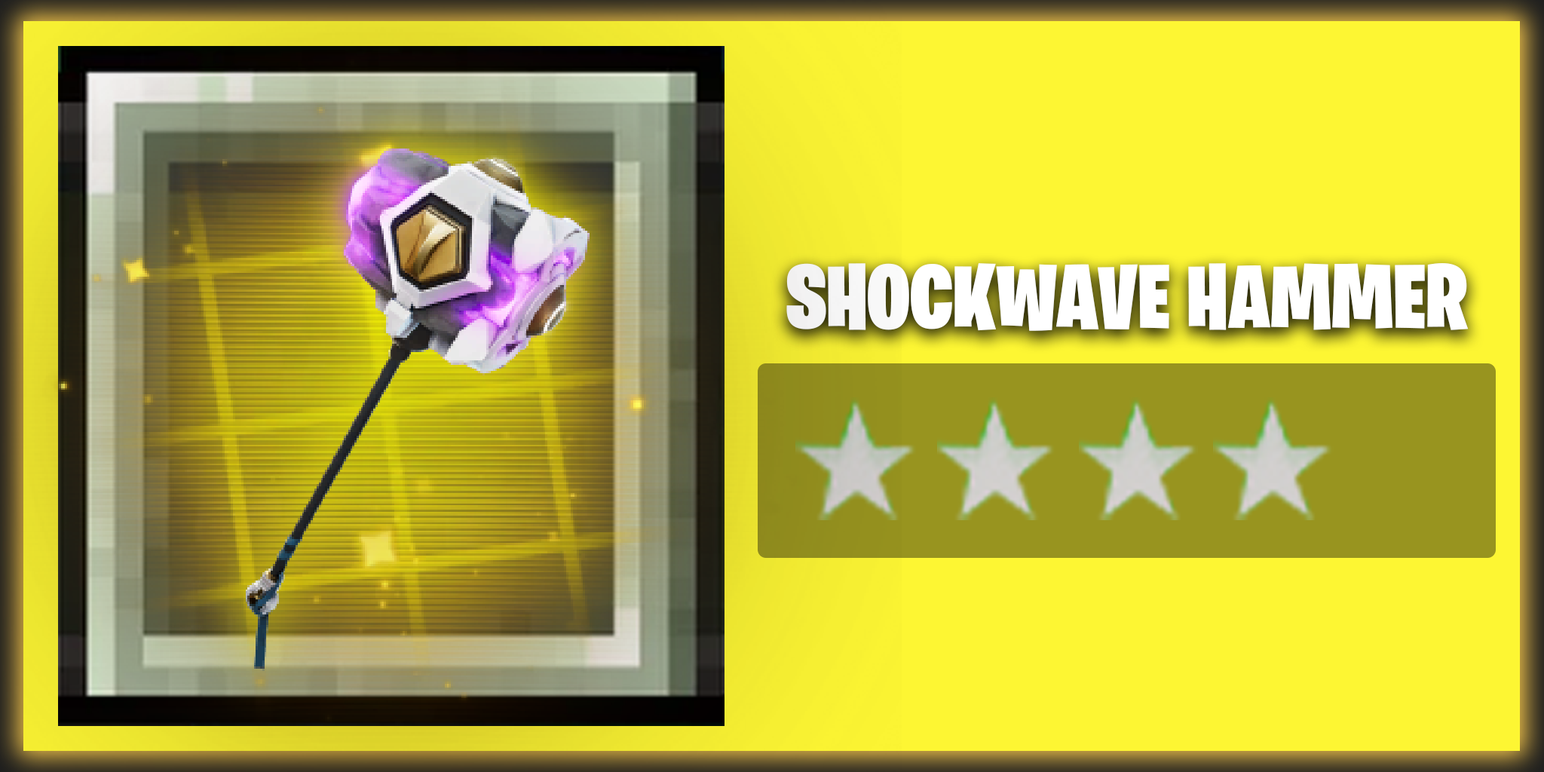
<style>
.page{position:relative;width:1544px;height:772px;background:#fdf633}
.page>*{position:absolute;margin:0}
.t1{font:90.5px "BurbankBigCondensed-Black";color:#ffffff}
</style>
<div class="page">
<p class="t1" style="left:786px;top:263px;width:683px;height:68px">SHOCKWAVE HAMMER</p>
</div>
